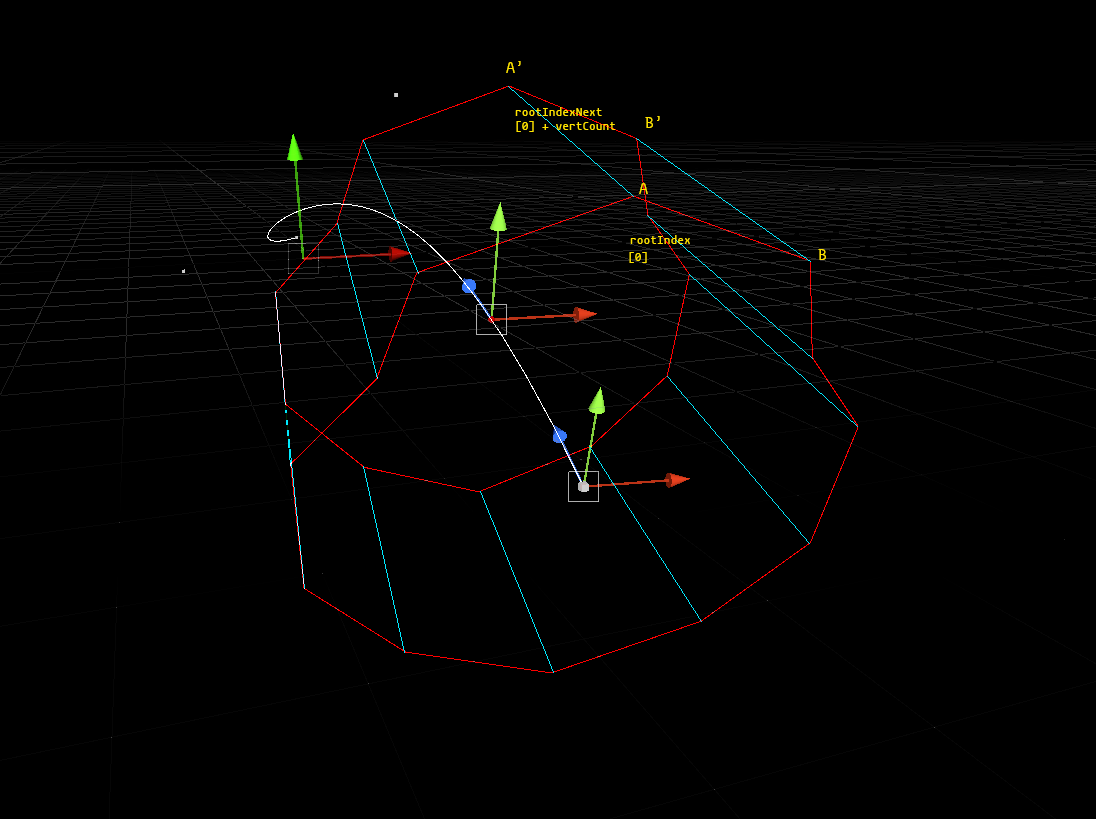
<style>
.page{position:relative;width:1096px;height:819px;background:#000000}
.page>*{position:absolute;margin:0}
.t1{font:16px "mononoki-Regular";color:#ffe400}
.t2{font:12px "mononoki-Regular";color:#ffe400}
</style>
<div class="page">
<p class="t1" style="left:506px;top:61px;width:15px;height:12px">A’</p>
<p class="t2" style="left:515px;top:107px;width:101px;height:25px">rootIndexNext<br>[0] + vertCount</p>
<p class="t1" style="left:645px;top:116px;width:15px;height:12px">B’</p>
<p class="t1" style="left:639px;top:183px;width:9px;height:11px">A</p>
<p class="t2" style="left:630px;top:235px;width:60px;height:9px">rootIndex</p>
<p class="t2" style="left:629px;top:252px;width:18px;height:11px">[0]</p>
<p class="t1" style="left:818px;top:249px;width:8px;height:11px">B</p>
</div>
